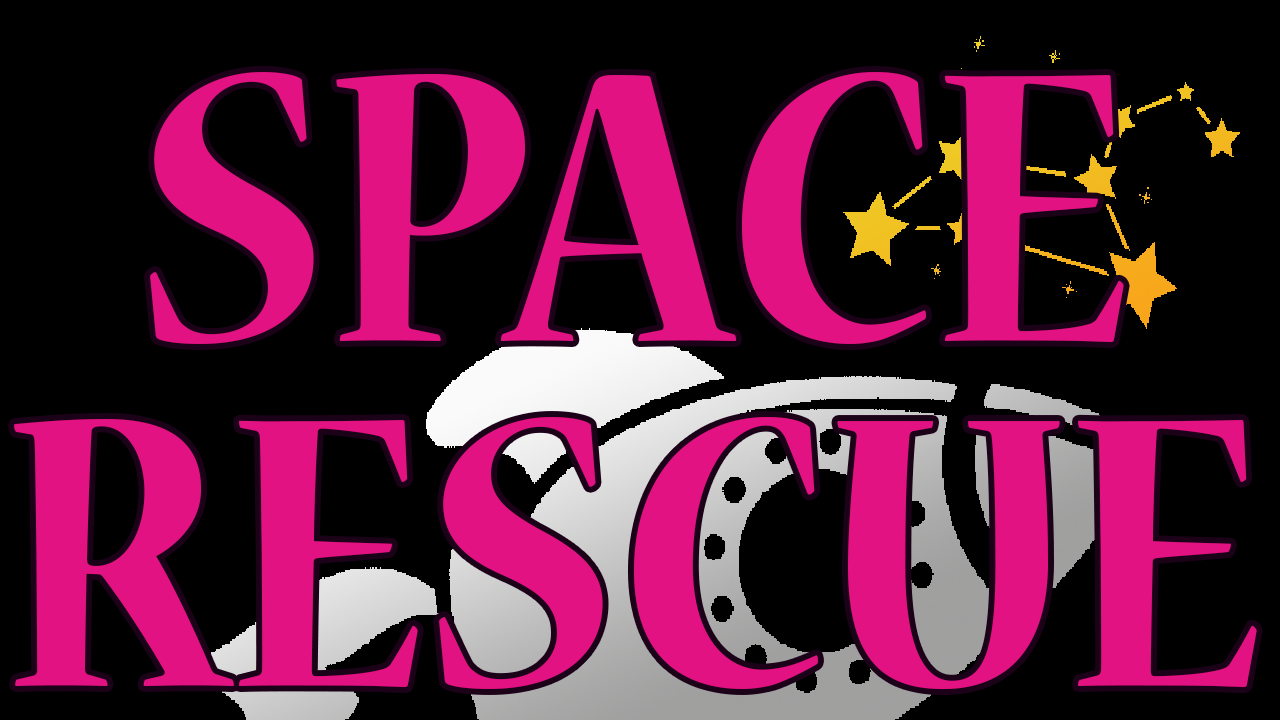
<style>
.page{position:relative;width:1280px;height:720px;background:#000000}
.page>*{position:absolute;margin:0}
.t1{font:429.1px/345.6px "NuevaStd-Bold";color:#e21282;scale:0.87 1}
</style>
<div class="page">
<p class="t1" style="left:14px;top:72px;width:1243px;height:618px;text-align:center">SPACE<br>RESCUE</p>
</div>
